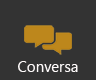
<style>
.page{position:relative;width:96px;height:80px;background:#333333}
.page>*{position:absolute;margin:0}
.t1{font:15px "SegoeUI";color:#fefafa}
</style>
<div class="page">
<p class="t1" style="left:18px;top:61px;width:60px;height:11px">Conversa</p>
</div>
